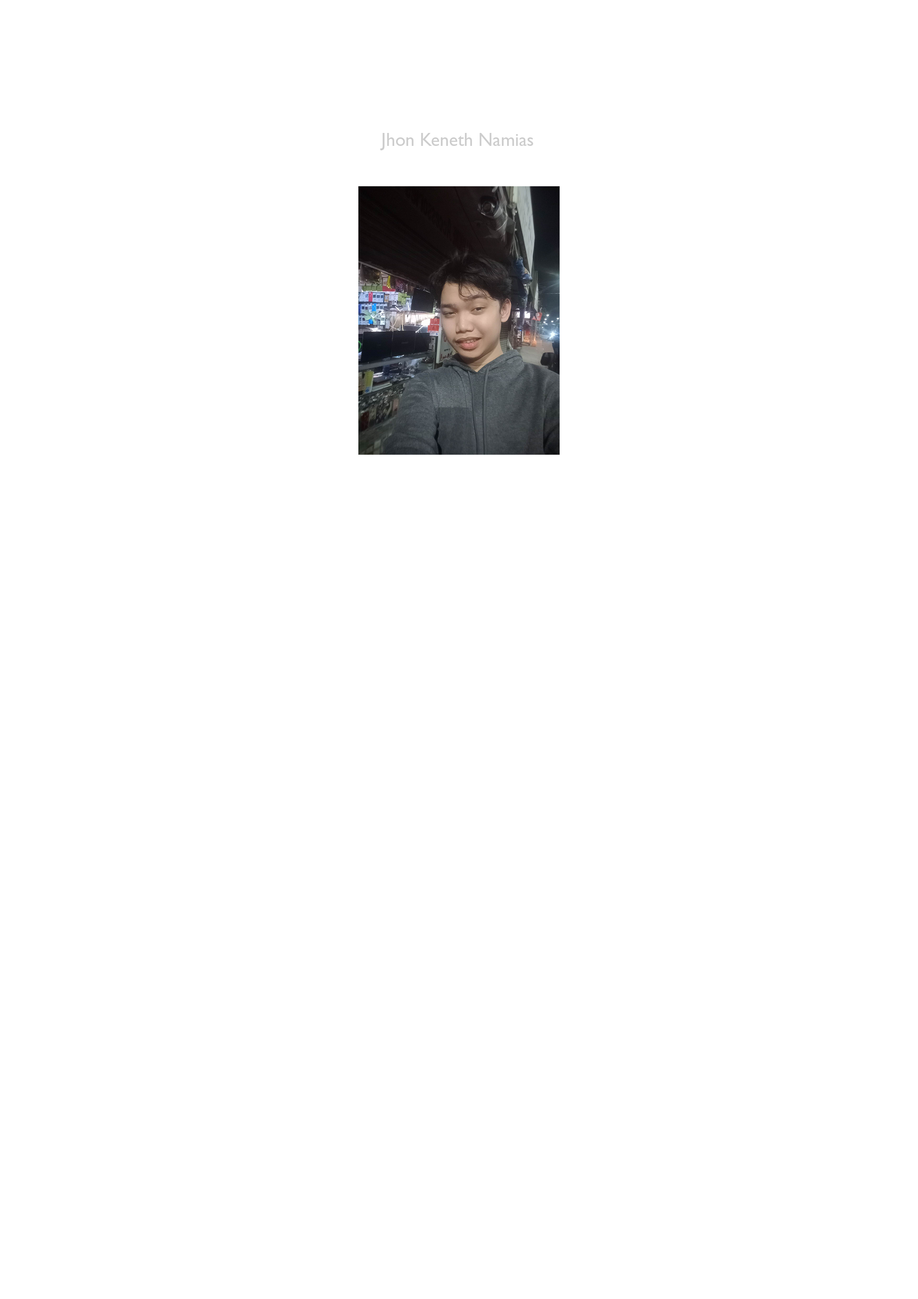
<style>
.page{position:relative;width:918px;height:1299px;background:#ffffff}
.page>*{position:absolute;margin:0}
.t1{font:18.5px "GillSansMT";color:#cdcdcd}
</style>
<div class="page">
<p class="t1" style="left:380px;top:133px;width:153px;height:17px">Jhon Keneth Namias</p>
</div>
